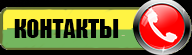
<style>
.page{position:relative;width:192px;height:55px;background:#000000}
.page>*{position:absolute;margin:0}
.t1{font:23.7px "Impact";color:#000000}
</style>
<div class="page">
<p class="t1" style="left:14px;top:19px;width:105px;height:19px">КОНТАКТЫ</p>
</div>
